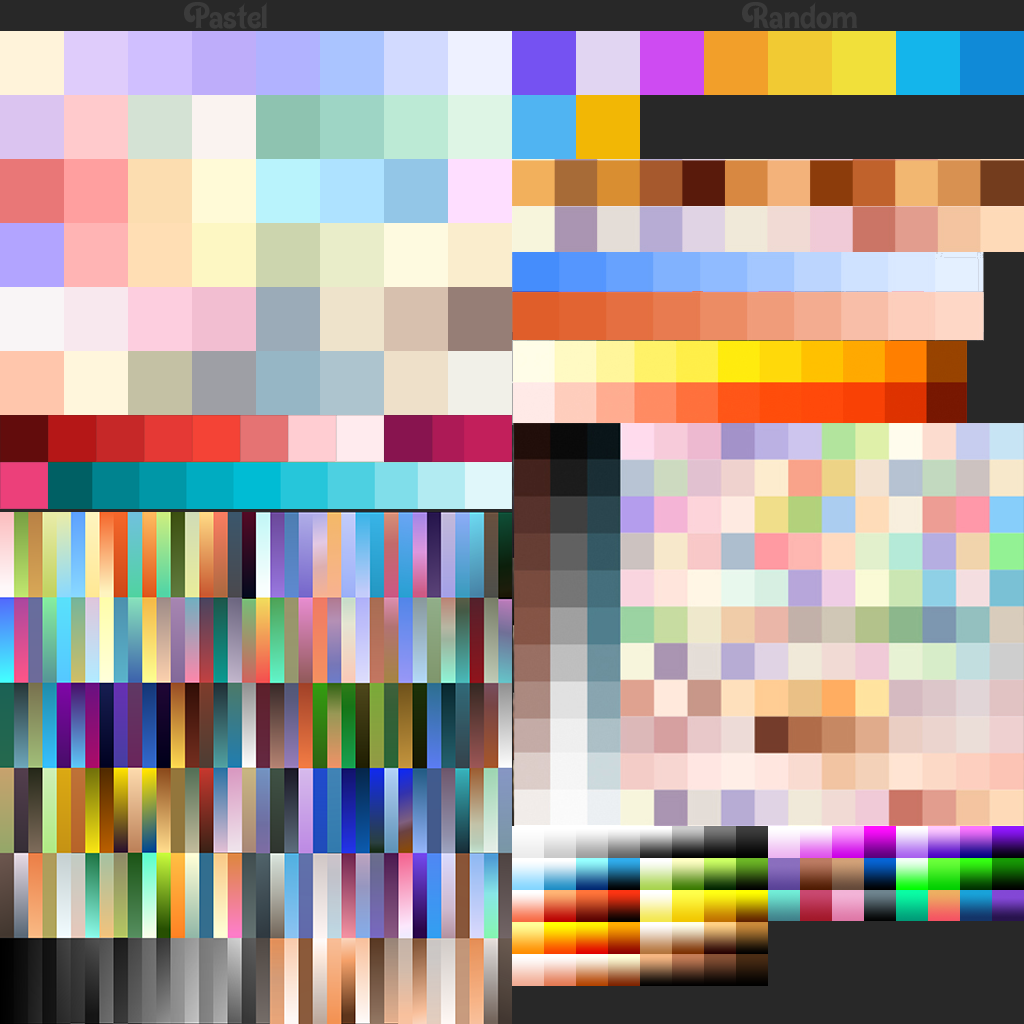
<style>
.page{position:relative;width:1024px;height:1024px}
.page>*{position:absolute;margin:0}
.t1{font:45.8px "BoogieBoysPS";color:#3b3b3b}
</style>
<div class="page">
<p class="t1" style="left:184px;top:2px;width:83px;height:27px">Pastel</p>
<p class="t1" style="left:742px;top:2px;width:116px;height:27px">Random</p>
</div>
